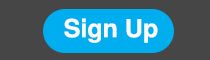
<style>
.page{position:relative;width:210px;height:60px;background:#464646}
.page>*{position:absolute;margin:0}
.t1{font:25px "TeXGyreHeros-Bold";color:#fbfafa}
</style>
<div class="page">
<p class="t1" style="left:64px;top:18px;width:94px;height:25px">Sign Up</p>
</div>
